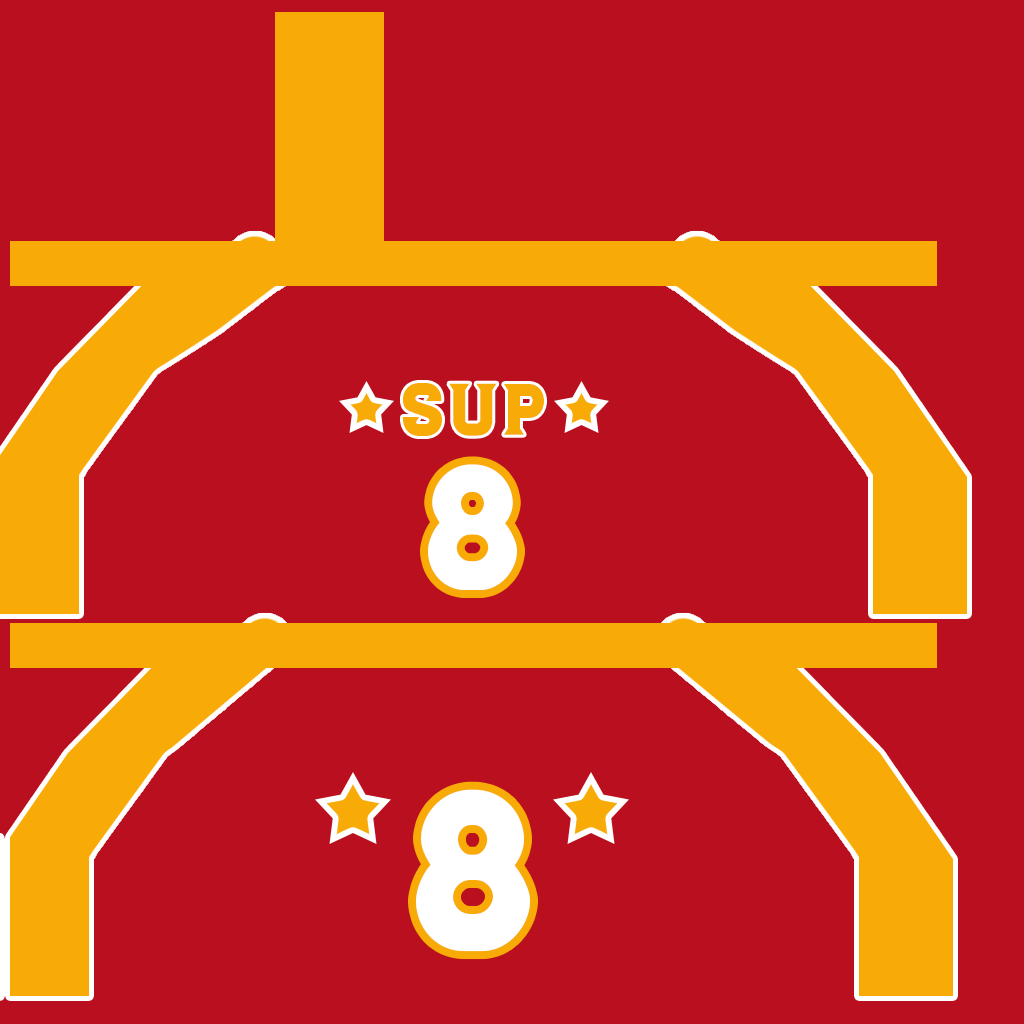
<style>
.page{position:relative;width:1024px;height:1024px;background:#ba0f1e}
.page>*{position:absolute;margin:0}
.t1{font:73.1px "Luchador-Regular";letter-spacing:0.05em;color:#f8ab06}
.t2{font:179.4px "Luchador-Regular";letter-spacing:0.05em;color:#ffffff}
.t3{font:230.9px "Luchador-Regular";letter-spacing:0.05em;color:#ffffff}
</style>
<div class="page">
<p class="t1" style="left:403px;top:383px;width:141px;height:53px">Sup</p>
<p class="t2" style="left:428px;top:464px;width:89px;height:126px">8</p>
<p class="t3" style="left:416px;top:789px;width:114px;height:163px">8</p>
</div>
